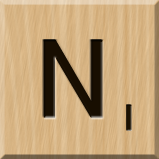
<style>
.page{position:relative;width:159px;height:159px}
.page>*{position:absolute;margin:0}
.t1{font:116px "MS-UIGothic";color:#180e01}
.t2{font:36px "GillSansMT";color:#1c1101;font-weight:bold;scale:1.1 1}
</style>
<div class="page">
<p class="t1" style="left:43px;top:40px;width:60px;height:78px">N</p>
<p class="t2" style="left:126px;top:104px;width:6px;height:27px">1</p>
</div>
